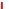
<style>
.page{position:relative;width:9px;height:9px;background:#ffffff}
.page>*{position:absolute;margin:0}
.t1{font:10px "Frutiger-Black";letter-spacing:0.01em;color:#da1c0e}
</style>
<div class="page">
<p class="t1" style="left:1px;top:2px;width:2px;height:7px">I</p>
</div>
